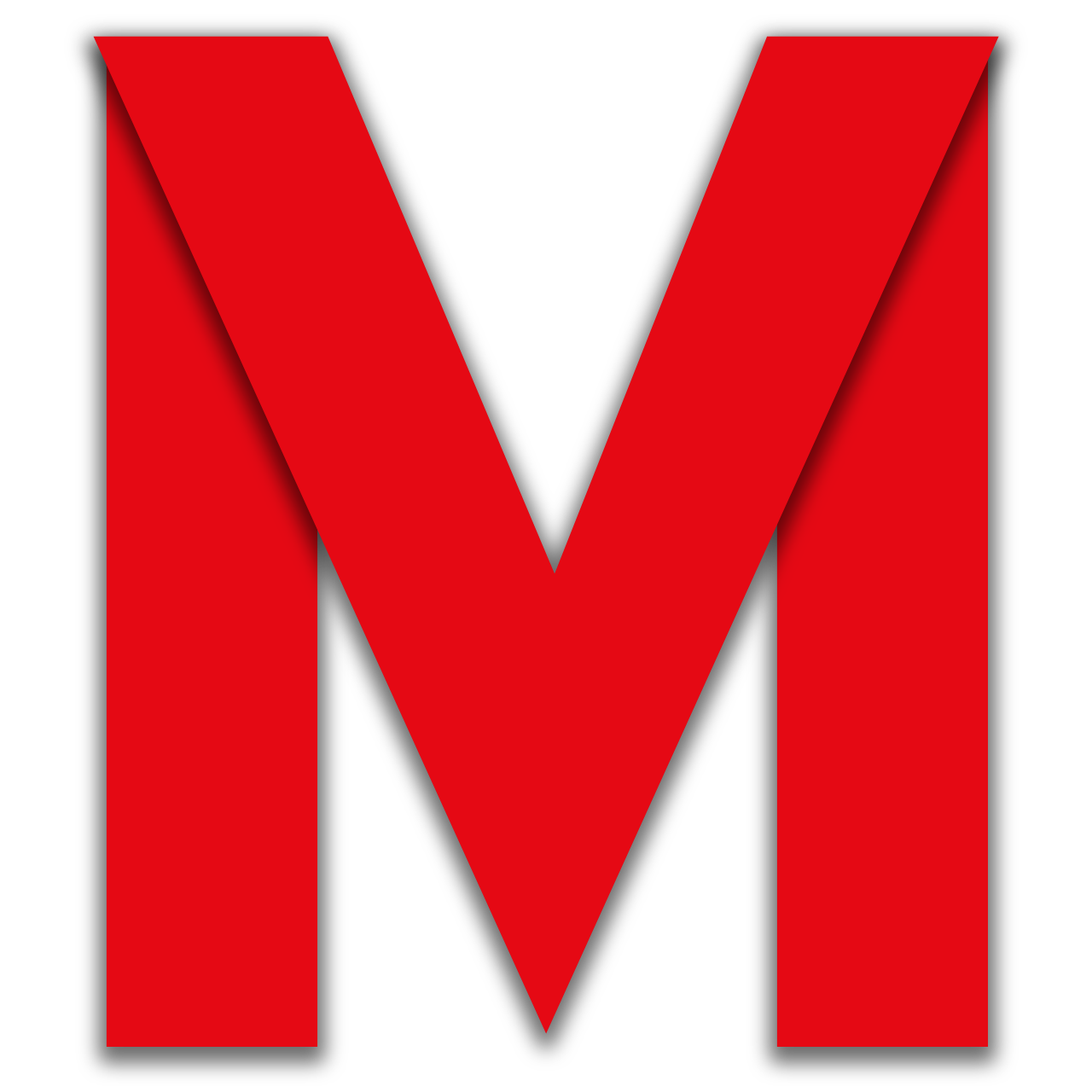
<style>
.page{position:relative;width:1092px;height:1092px;background:#e50914}
.page>*{position:absolute;margin:0}
.t1{font:1295.1px "JosefinSans-Bold";color:#e50914;scale:1.04 1}
.t2{font:1431.7px "BebasNeueBold";color:#e50914;scale:1.34 1}
</style>
<div class="page">
<p class="t1" style="left:93px;top:36px;width:906px;height:998px">V</p>
<p class="t2" style="left:106px;top:44px;width:212px;height:1003px">I</p>
<p class="t2" style="left:776px;top:44px;width:213px;height:1003px">I</p>
</div>
